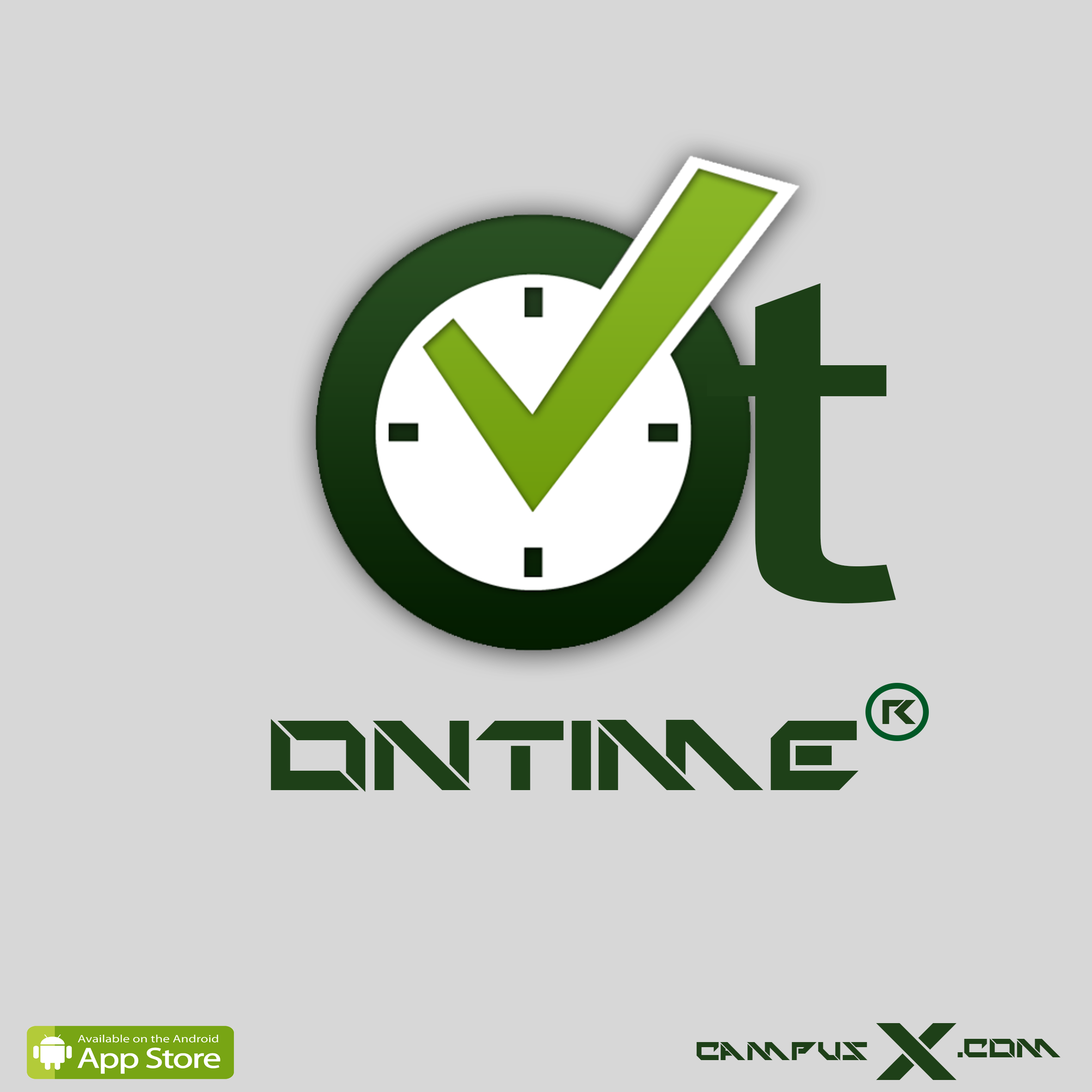
<style>
.page{position:relative;width:1092px;height:1092px;background:#d7d7d7}
.page>*{position:absolute;margin:0}
.t1{font:452.4px "ArialMT";color:#1e4018;scale:1.65 1}
.t2{font:48.1px "TechnoHideo-Bold";color:#1e4018}
.t3{font:138.7px "TechnoHideo-Bold";color:#1e4018}
.t4{font:113.8px "TechnoHideo-Bold";color:#1e4018}
.t5{font:35.6px "TechnoHideo-Bold";color:#1e4018}
.t6{font:36.7px "TechnoHideo-Bold";color:#1e4018}
</style>
<div class="page">
<p class="t1" style="left:707px;top:283px;width:189px;height:320px">t</p>
<p class="t2" style="left:882px;top:700px;width:34px;height:24px">r</p>
<p class="t3" style="left:271px;top:719px;width:588px;height:73px">ontiMe</p>
<p class="t4" style="left:876px;top:1023px;width:81px;height:57px">x</p>
<p class="t5" style="left:696px;top:1042px;width:172px;height:19px">caMpus</p>
<p class="t6" style="left:957px;top:1038px;width:104px;height:20px">.coM</p>
</div>
